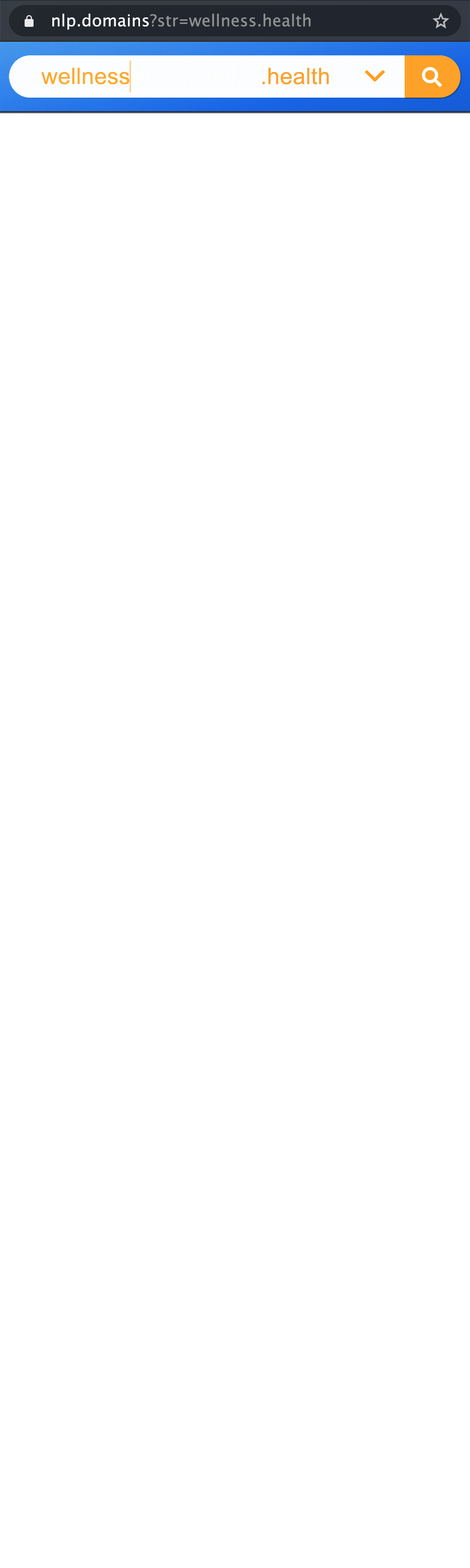
<style>
.page{position:relative;width:470px;height:1568px;background:#ffffff}
.page>*{position:absolute;margin:0}
.t1{font:16.2px "LucidaGrande";letter-spacing:0.01em;color:#909192}
.t2{font:16.2px "LucidaGrande";letter-spacing:0.01em;color:#ffffff}
.t3{font:16.2px "LucidaGrande-Bold";letter-spacing:0.01em;color:#909192;scale:0.8 1}
.t4{font:22.7px "ArialMT";letter-spacing:0.01em;color:#fda929}
.t5{font:22.8px "ArialMT";letter-spacing:0.01em;color:#fda128}
</style>
<div class="page">
<p class="t1" style="left:52px;top:14px;width:259px;height:16px"><span class="t2">nlp.domains</span>?str<span class="t3">=</span>wellness.health</p>
<p class="t4" style="left:41px;top:67px;width:88px;height:18px">wellness</p>
<p class="t5" style="left:262px;top:67px;width:67px;height:18px">.health</p>
</div>
